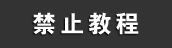
<style>
.page{position:relative;width:172px;height:48px;background:#333333}
.page>*{position:absolute;margin:0}
.t1{font:24px "Jdahei";letter-spacing:0.15em;color:#ffffff}
</style>
<div class="page">
<p class="t1" style="left:33px;top:12px;width:106px;height:23px">禁止教程</p>
</div>
